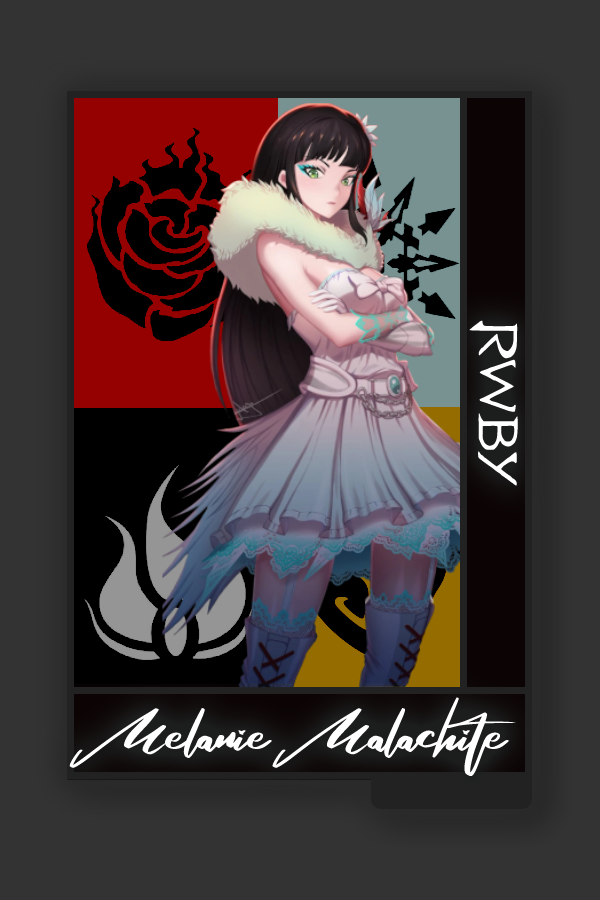
<style>
.page{position:relative;width:600px;height:900px;background:#333333}
.page>*{position:absolute;margin:0}
.t1{font:61.3px "RWBY_Style";color:#ffffff;scale:1.25 1}
.t2{font:75px "RosegaFREE";color:#ffffff}
</style>
<div class="page">
<p class="t1" style="left:469px;top:320px;width:49px;height:166px;rotate:90deg">RWBY</p>
<p class="t2" style="left:69px;top:697px;width:448px;height:80px">Melanie Malachite</p>
</div>
